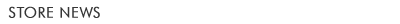
<style>
.page{position:relative;width:400px;height:24px;background:#ffffff}
.page>*{position:absolute;margin:0}
.t1{font:14.7px "FuturaBT-Light";letter-spacing:0.025em;color:#363636;text-transform:uppercase;font-weight:bold}
</style>
<div class="page">
<p class="t1" style="left:8px;top:6px;width:92px;height:12px">STORE NEWS</p>
</div>
